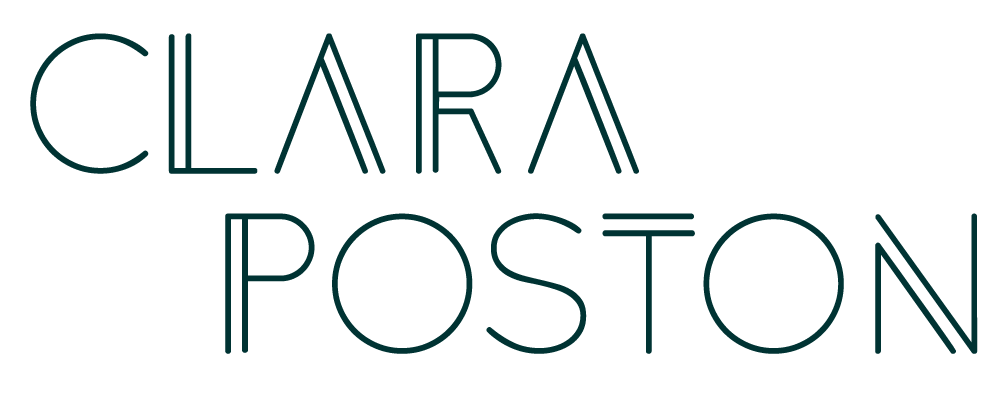
<style>
.page{position:relative;width:1000px;height:395px;background:#ffffff}
.page>*{position:absolute;margin:0}
.t1{font:175px "Anders";color:#003333}
</style>
<div class="page">
<p class="t1" style="left:30px;top:33px;width:609px;height:141px">Clara</p>
<p class="t1" style="left:225px;top:213px;width:753px;height:141px">Poston</p>
</div>
